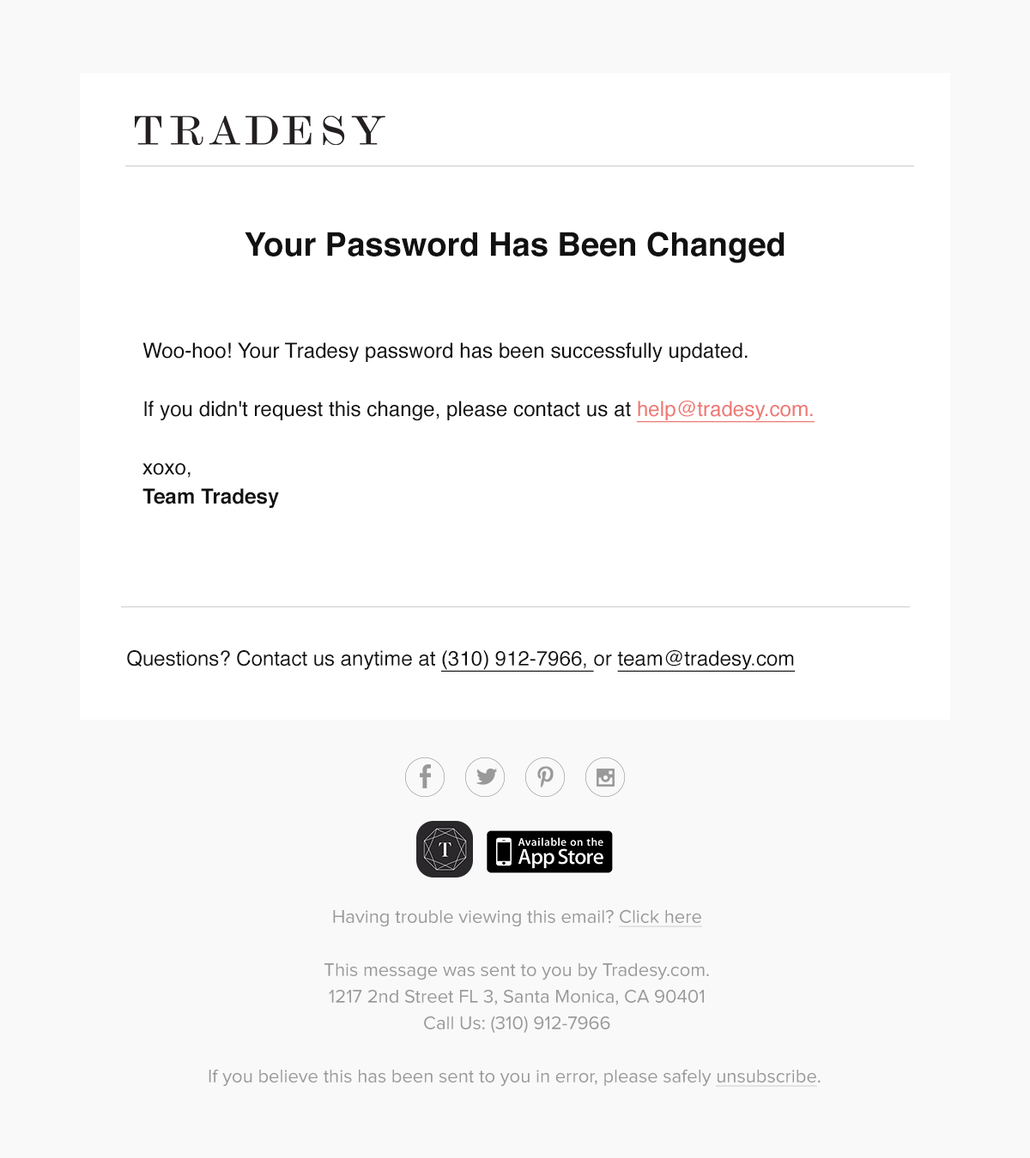
<style>
.page{position:relative;width:1030px;height:1158px;background:#f9f9f9}
.page>*{position:absolute;margin:0}
.t1{font:32.6px "Helvetica-Bold";color:#111111}
.t2{font:20.7px/29.2px "Helvetica";color:#111111}
.t3{font:20.7px/29.2px "Helvetica";color:#ee7873;text-decoration:underline}
.t4{font:20.7px/29.2px "Helvetica-Bold";color:#111111}
.t5{font:20.6px "Helvetica";color:#111111}
.t6{font:20.6px "Helvetica";color:#111111;text-decoration:underline}
.t7{font:18.9px/26.6px "ProximaNova-Regular";color:#999999}
.t8{font:18.9px/26.6px "ProximaNova-Regular";color:#999999;text-decoration:underline}
</style>
<div class="page">
<p class="t1" style="left:245px;top:232px;width:539px;height:31px">Your Password Has Been Changed</p>
<p class="t2" style="left:142px;top:342px;width:672px;height:167px">Woo-hoo! Your Tradesy password has been successfully updated.<br><br>If you didn't request this change, please contact us at <span class="t3">help@tradesy.com.<br></span><br>xoxo,<br><span class="t4">Team Tradesy</span></p>
<p class="t5" style="left:127px;top:650px;width:668px;height:22px">Questions? Contact us anytime at <span class="t6">(310) 912-7966, </span>or <span class="t6">team@tradesy.com</span></p>
<p class="t7" style="left:208px;top:909px;width:612px;height:178px;text-align:center">Having trouble viewing this email? <span class="t8">Click here<br></span><br>This message was sent to you by Tradesy.com.<br>1217 2nd Street FL 3, Santa Monica, CA 90401<br>Call Us: (310) 912-7966<br><br>If you believe this has been sent to you in error, please safely <span class="t8">unsubscribe</span>.</p>
</div>
